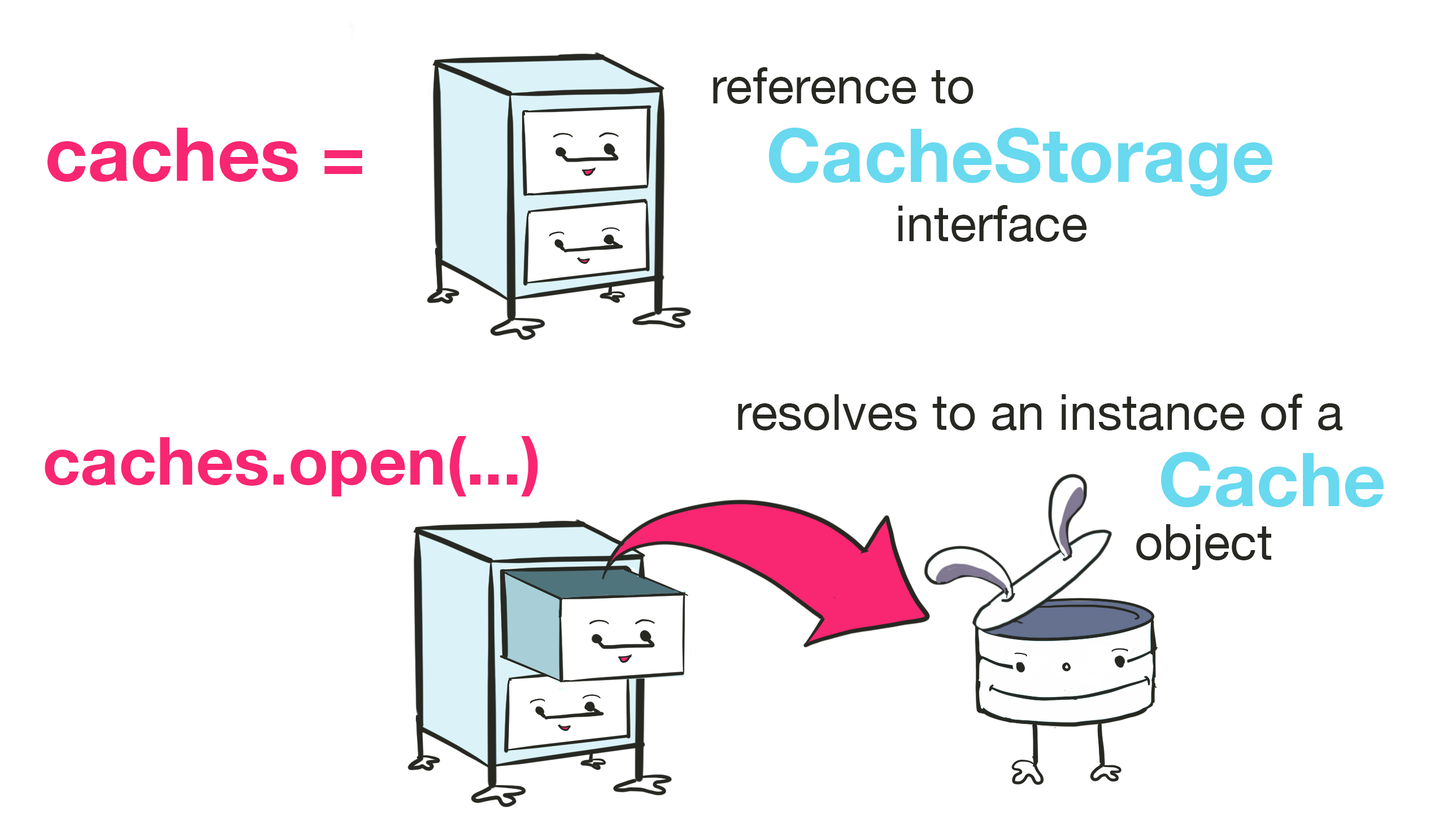
<style>
.page{position:relative;width:1456px;height:819px;background:#ffffff}
.page>*{position:absolute;margin:0}
.t1{font:49.7px "HelveticaNeue";color:#272822}
.t2{font:74.6px "HelveticaNeue-Bold";color:#f92672}
.t3{font:74.6px "HelveticaNeue-Bold";color:#68d9ef}
.t4{font:66.3px "HelveticaNeue-Bold";color:#f92672}
</style>
<div class="page">
<p class="t1" style="left:713px;top:67px;width:260px;height:37px">reference to</p>
<p class="t2" style="left:47px;top:128px;width:315px;height:54px">caches =</p>
<p class="t3" style="left:769px;top:128px;width:503px;height:69px">CacheStorage</p>
<p class="t1" style="left:898px;top:205px;width:189px;height:37px">interface</p>
<p class="t1" style="left:738px;top:394px;width:604px;height:36px">resolves to an instance of a</p>
<p class="t4" style="left:45px;top:436px;width:493px;height:61px">caches.open(...)</p>
<p class="t3" style="left:1161px;top:452px;width:222px;height:55px">Cache</p>
<p class="t1" style="left:1136px;top:524px;width:135px;height:46px">object</p>
</div>
